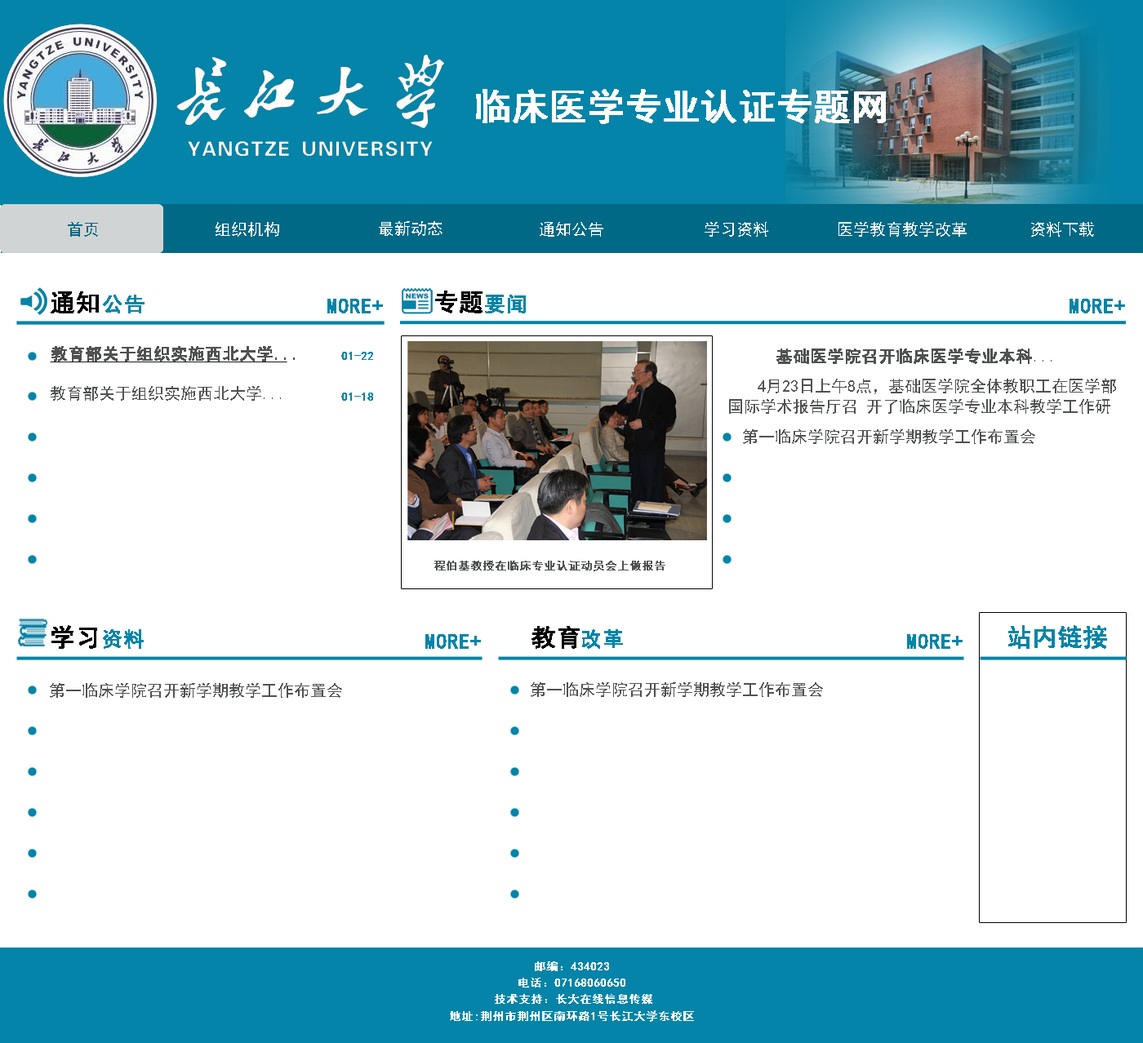
<style>
.page{position:relative;width:1143px;height:1043px;background:#ffffff}
.page>*{position:absolute;margin:0}
.t1{font:36.7px "SimHei";color:#fffefc;font-weight:bold}
.t2{font:16.3px "SimHei";color:#ffffff}
.t3{font:16.3px "SimHei";color:#006986}
.t4{font:24.5px "SimHei";color:#000000;font-weight:bold}
.t5{font:20.4px "SimHei";color:#0384a8;font-weight:bold}
.t6{font:16.3px "SimHei";color:#505252;font-weight:bold}
.t7{font:11.4px "SimHei";color:#0384a8;font-weight:bold}
.t8{font:11.4px "SimHei";color:#333434;font-weight:bold}
.t9{font:16.3px "SimHei";color:#505252}
.t10{font:16.3px/20.2px "SimHei";color:#505252}
.t11{font:11.4px/20.2px "SimHei";color:#505252}
.t12{font:11.4px "SimHei";color:#505252;font-weight:bold}
.t13{font:24.5px "SimHei";color:#0384a8;font-weight:bold}
.t14{font:11.4px "SimHei";color:#fffefc;font-weight:bold}
</style>
<div class="page">
<p class="t1" style="left:476px;top:89px;width:410px;height:35px">临床医学专业认证专题网</p>
<p class="t2" style="left:379px;top:221px;width:63px;height:15px">最新动态</p>
<p class="t3" style="left:68px;top:222px;width:30px;height:15px">首页</p>
<p class="t2" style="left:216px;top:222px;width:63px;height:15px">组织机构</p>
<p class="t2" style="left:540px;top:222px;width:63px;height:15px">通知公告</p>
<p class="t2" style="left:705px;top:222px;width:63px;height:15px">学习资料</p>
<p class="t2" style="left:838px;top:222px;width:129px;height:15px">医学教育教学改革</p>
<p class="t2" style="left:1031px;top:222px;width:63px;height:15px">资料下载</p>
<p class="t4" style="left:51px;top:291px;width:48px;height:22px">通知</p>
<p class="t4" style="left:435px;top:291px;width:47px;height:22px">专题</p>
<p class="t5" style="left:103px;top:295px;width:41px;height:18px">公告</p>
<p class="t5" style="left:327px;top:299px;width:56px;height:14px">MORE+</p>
<p class="t5" style="left:485px;top:295px;width:41px;height:18px">要闻</p>
<p class="t5" style="left:1069px;top:299px;width:56px;height:14px">MORE+</p>
<p class="t6" style="left:51px;top:346px;width:244px;height:16px">教育部关于组织实施西北大学...</p>
<p class="t7" style="left:341px;top:352px;width:32px;height:8px">01-22</p>
<p class="t6" style="left:776px;top:349px;width:275px;height:15px"><span class="t8">       </span>基础医学院召开临床医学专业本科<span class="t9">..</span><span class="t9">.</span></p>
<p class="t9" style="left:51px;top:386px;width:230px;height:15px">教育部关于组织实施西北大学...</p>
<p class="t10" style="left:729px;top:379px;width:387px;height:35px"><span class="t11"> </span>   4月23日上午8点，基础医学院全体教职工在医学部<br>国际学术报告厅召 开了临床医学专业本科教学工作研</p>
<p class="t7" style="left:341px;top:393px;width:32px;height:8px">01-18</p>
<p class="t9" style="left:743px;top:429px;width:292px;height:15px">第一临床学院召开新学期教学工作布置会</p>
<p class="t12" style="left:434px;top:561px;width:231px;height:10px">程伯基教授在临床专业认证动员会上做报告</p>
<p class="t4" style="left:51px;top:625px;width:46px;height:24px">学习</p>
<p class="t5" style="left:103px;top:629px;width:41px;height:20px">资料</p>
<p class="t4" style="left:531px;top:626px;width:49px;height:23px">教育</p>
<p class="t5" style="left:582px;top:629px;width:41px;height:20px">改革</p>
<p class="t13" style="left:1008px;top:625px;width:99px;height:24px">站内链接</p>
<p class="t5" style="left:425px;top:634px;width:56px;height:15px">MORE+</p>
<p class="t5" style="left:907px;top:634px;width:56px;height:15px">MORE+</p>
<p class="t9" style="left:50px;top:683px;width:292px;height:15px">第一临床学院召开新学期教学工作布置会</p>
<p class="t9" style="left:531px;top:682px;width:292px;height:15px">第一临床学院召开新学期教学工作布置会</p>
<p class="t14" style="left:535px;top:962px;width:74px;height:9px">邮编：434023</p>
<p class="t14" style="left:518px;top:978px;width:107px;height:10px">电话：07168060650</p>
<p class="t14" style="left:495px;top:994px;width:157px;height:10px">技术支持：长大在线信息传媒</p>
<p class="t14" style="left:450px;top:1011px;width:244px;height:11px">地址:荆州市荆州区南环路1号长江大学东校区</p>
</div>
